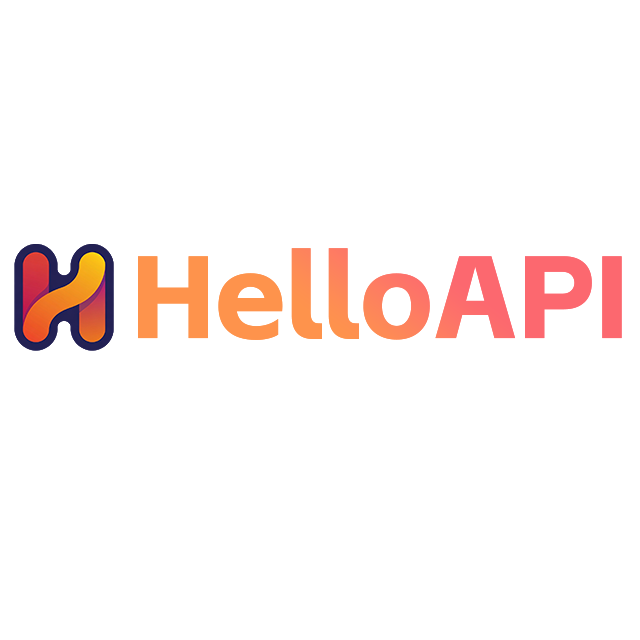
<style>
.page{position:relative;width:640px;height:640px;background:#ffffff}
.page>*{position:absolute;margin:0}
.t1{font:116.7px "AlimamaShuHeiTi-Bold"}
</style>
<div class="page">
<p class="t1" style="left:138px;top:248px;width:484px;height:92px">HelloAPI</p>
<p class="t1" style="left:138px;top:248px;width:484px;height:92px">HelloAPI</p>
</div>
